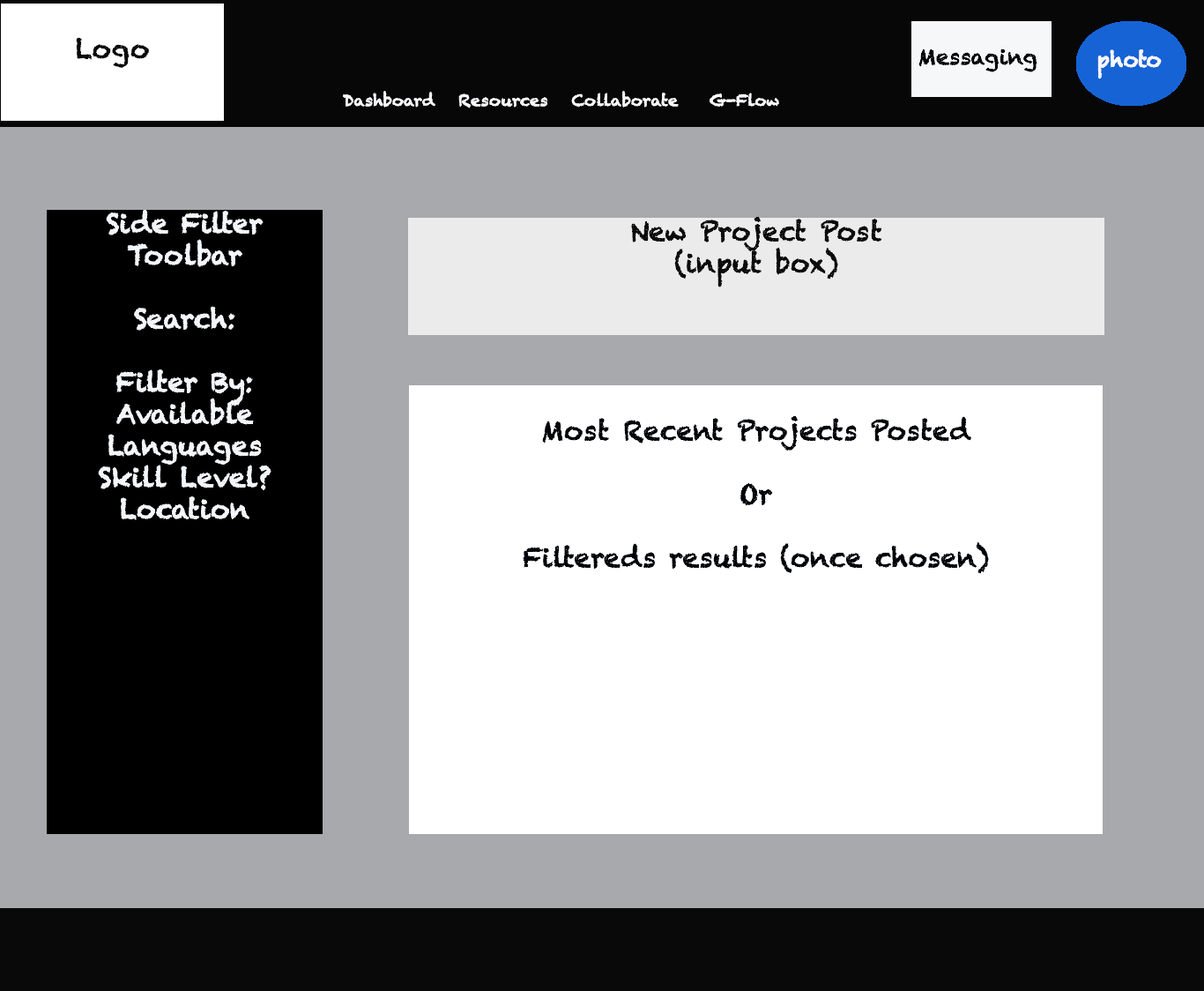
<style>
.page{position:relative;width:1204px;height:991px;background:#a7a9ac}
.page>*{position:absolute;margin:0}
.t1{font:15.9px "Chalkduster";color:#f9fafc}
.t2{font:26.4px "Chalkduster";color:#f9fafc}
.t3{font:26.4px "Chalkduster";color:#f3f6fa}
.t4{font:26.4px "Chalkduster";color:#0b0b0b}
.t5{font:26.4px "Chalkduster";color:#00040a}
</style>
<div class="page">
<p class="t1" style="left:343px;top:91px;width:436px;height:17px"><span class="t2">           </span>Dashboard   Resources   Collaborate    G-Flow</p>
<p class="t3" style="left:98px;top:210px;width:173px;height:310px;text-align:center">Side Filter<br>Toolbar<br><br>Search:<br><br>Filter By:<br>Available<br>Languages<br>Skill Level?<br>Location</p>
<p class="t4" style="left:631px;top:217px;width:251px;height:70px;text-align:center">New Project Post<br>(input box)</p>
<p class="t5" style="left:523px;top:415px;width:466px;height:159px;text-align:center">Most Recent Projects Posted<br><br>Or <br><br>Filtereds results (once chosen)</p>
</div>
